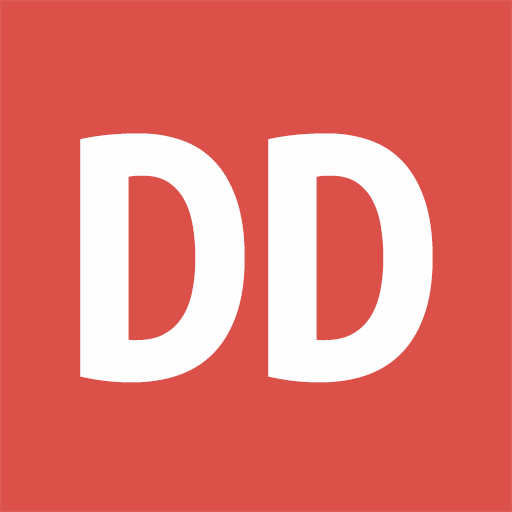
<style>
.page{position:relative;width:512px;height:512px;background:#dc504a}
.page>*{position:absolute;margin:0}
.t1{font:392px "UbuntuMono-Bold";letter-spacing:-0.02em;color:#fffefe}
</style>
<div class="page">
<p class="t1" style="left:80px;top:133px;width:353px;height:250px">DD</p>
</div>
